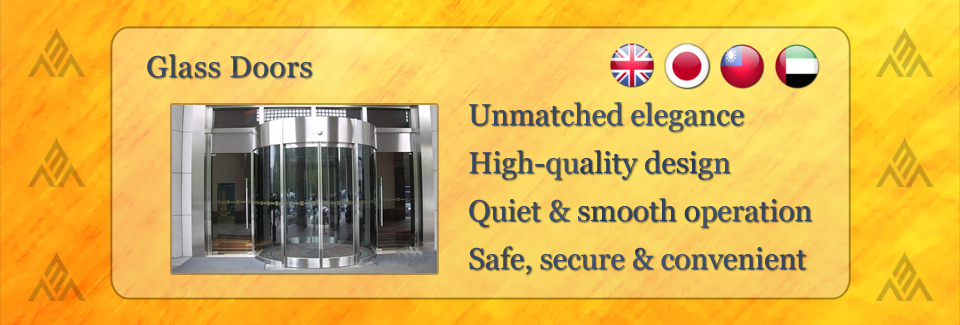
<style>
.page{position:relative;width:960px;height:325px}
.page>*{position:absolute;margin:0}
.t1{font:30px "Georgia";letter-spacing:0.025em;color:#364866}
.t2{font:30px/48px "Georgia";color:#364968}
</style>
<div class="page">
<p class="t1" style="left:147px;top:54px;width:165px;height:24px">Glass Doors</p>
<p class="t2" style="left:469px;top:102px;width:343px;height:173px">Unmatched elegance<br>High-quality design<br>Quiet &amp; smooth operation<br>Safe, secure &amp; convenient</p>
</div>
